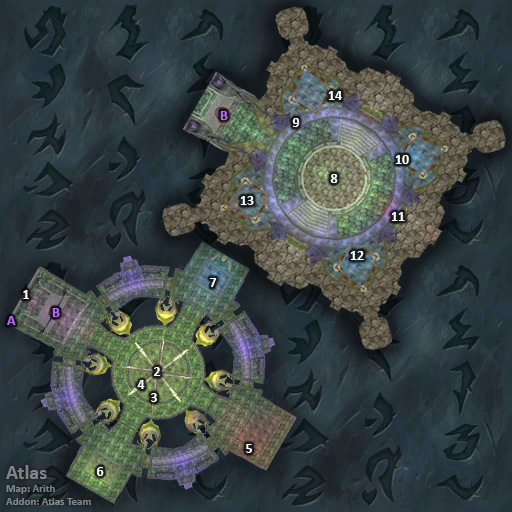
<style>
.page{position:relative;width:512px;height:512px}
.page>*{position:absolute;margin:0}
.t1{font:14px "Calibri-Bold";color:#ffffff}
.t2{font:14px "Calibri-Bold";color:#bb66ff}
.t3{font:11px "Calibri-Bold";color:#808486}
.t4{font:20px "Calibri-Bold";color:#808486}
</style>
<div class="page">
<p class="t1" style="left:328px;top:91px;width:14px;height:9px">14</p>
<p class="t2" style="left:220px;top:111px;width:8px;height:9px">B</p>
<p class="t1" style="left:292px;top:118px;width:8px;height:9px">9</p>
<p class="t1" style="left:395px;top:155px;width:14px;height:9px">10</p>
<p class="t1" style="left:330px;top:174px;width:8px;height:9px">8</p>
<p class="t1" style="left:240px;top:196px;width:14px;height:9px">13</p>
<p class="t1" style="left:391px;top:212px;width:14px;height:9px">11</p>
<p class="t1" style="left:350px;top:251px;width:14px;height:9px">12</p>
<p class="t1" style="left:209px;top:278px;width:8px;height:9px">7</p>
<p class="t1" style="left:23px;top:290px;width:6px;height:9px">1</p>
<p class="t2" style="left:7px;top:316px;width:9px;height:9px">A</p>
<p class="t2" style="left:52px;top:308px;width:8px;height:9px">B</p>
<p class="t1" style="left:154px;top:367px;width:7px;height:9px">2</p>
<p class="t1" style="left:137px;top:380px;width:8px;height:9px">4</p>
<p class="t1" style="left:151px;top:393px;width:6px;height:9px">3</p>
<p class="t1" style="left:246px;top:444px;width:6px;height:9px">5</p>
<p class="t3" style="left:6px;top:465px;width:85px;height:40px"><span class="t4">Atlas<br></span>Map: Arith<br>Addon: Atlas Team</p>
<p class="t1" style="left:97px;top:467px;width:7px;height:9px">6</p>
</div>
